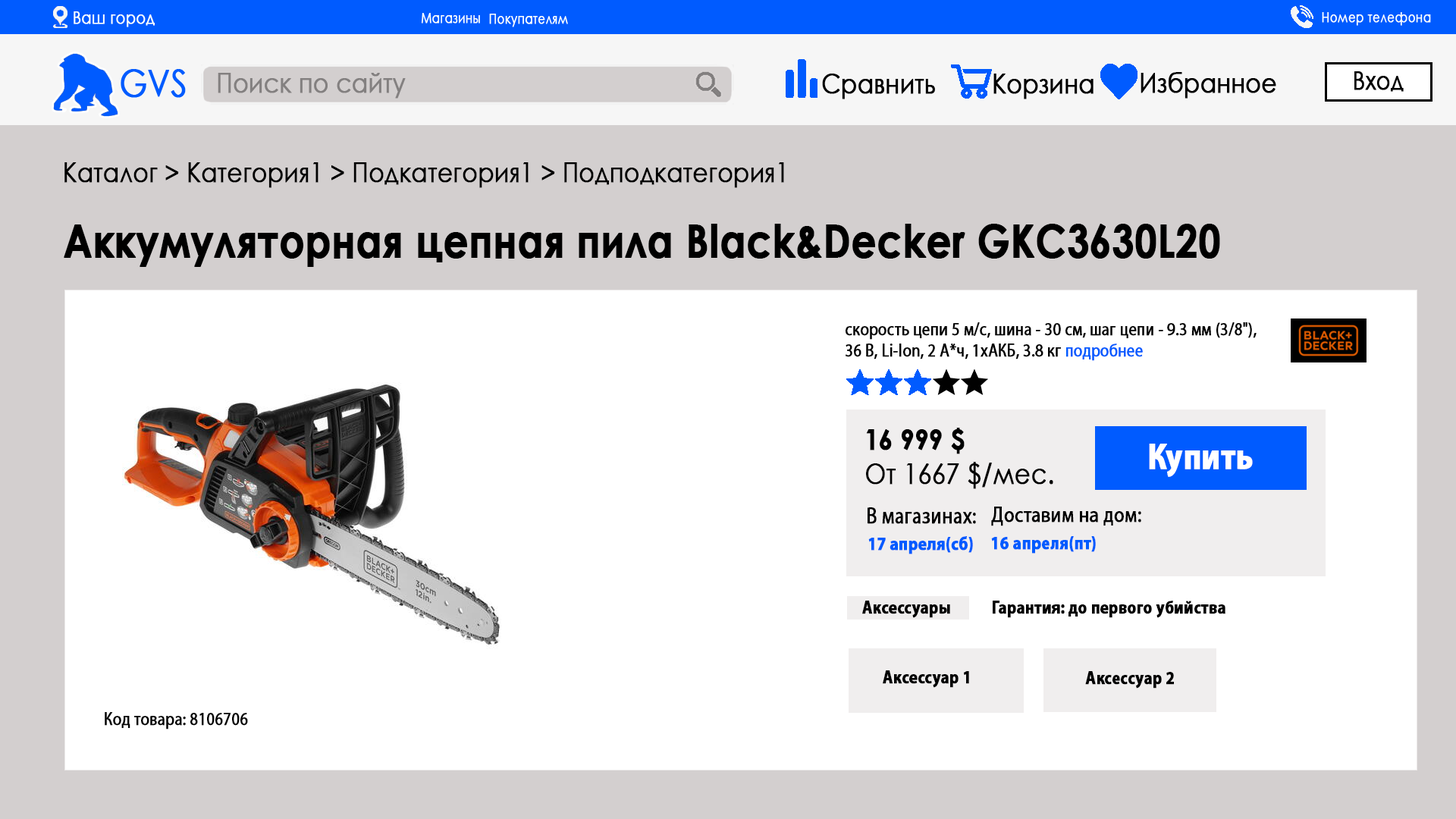
<style>
.page{position:relative;width:1456px;height:819px;background:#ffffff}
.page>*{position:absolute;margin:0}
.t1{font:13.6px "CenturyGothic";color:#ffffff;font-weight:bold;scale:0.85 1}
.t2{font:37.3px "CenturyGothic";color:#005bff;font-weight:bold;scale:0.85 1}
.t3{font:27.3px "CenturyGothic";color:#838080;font-weight:bold;scale:0.85 1}
.t4{font:27.3px "CenturyGothic";color:#000000;font-weight:bold;scale:0.85 1}
.t5{font:25px "CenturyGothic";color:#000000;font-weight:bold;scale:0.85 1}
.t6{font:45.5px "CenturyGothic-Bold";color:#000000;font-weight:bold;scale:0.85 1}
.t7{font:18.2px "MyriadPro-Regular";color:#000000;font-weight:bold;scale:0.85 1}
.t8{font:18.2px "MyriadPro-Regular";color:#005bff;font-weight:bold;scale:0.85 1}
.t9{font:28.5px "CenturyGothic";color:#000000;font-weight:bold;scale:0.85 1}
.t10{font:28.5px "CenturyGothic-Bold";color:#000000;font-weight:bold;scale:0.85 1}
.t11{font:36.4px "MyriadPro-Bold";color:#ffffff;font-weight:bold;scale:0.85 1}
.t12{font:22.7px "MyriadPro-Regular";color:#000000;font-weight:bold;scale:0.85 1}
.t13{font:22px "MyriadPro-Regular";color:#000000;font-weight:bold;scale:0.85 1}
.t14{font:18.8px "MyriadPro-Bold";color:#005bff;font-weight:bold;scale:0.85 1}
.t15{font:18.2px "MyriadPro-Bold";color:#000000;font-weight:bold;scale:0.85 1}
</style>
<div class="page">
<p class="t1" style="left:421px;top:13px;width:59px;height:11px">Магазины</p>
<p class="t1" style="left:489px;top:14px;width:79px;height:13px">Покупателям</p>
<p class="t2" style="left:121px;top:69px;width:65px;height:29px">GVS</p>
<p class="t3" style="left:218px;top:73px;width:188px;height:26px">Поиск по сайту</p>
<p class="t4" style="left:822px;top:74px;width:113px;height:25px">Сравнить</p>
<p class="t4" style="left:993px;top:74px;width:101px;height:25px">Корзина</p>
<p class="t4" style="left:1141px;top:72px;width:135px;height:27px">Избранное</p>
<p class="t5" style="left:1354px;top:71px;width:50px;height:21px">Вход</p>
<p class="t4" style="left:64px;top:162px;width:720px;height:26px">Каталог &gt; Категория1 &gt; Подкатегория1 &gt; Подподкатегория1</p>
<p class="t6" style="left:64px;top:224px;width:1156px;height:43px">Аккумуляторная цепная пила Black&amp;Decker GKC3630L20</p>
<p class="t7" style="left:845px;top:322px;width:412px;height:39px">скорость цепи 5 м/с, шина - 30 см, шаг цепи - 9.3 мм (3/8"), <br>36 В, Li-Ion, 2 А*ч, 1хАКБ, 3.8 кг <span class="t8">подробнее</span></p>
<p class="t9" style="left:866px;top:428px;width:187px;height:61px"><span class="t10">16 999 $<br></span>От 1667 $/мес.</p>
<p class="t11" style="left:1149px;top:444px;width:104px;height:33px">Купить</p>
<p class="t12" style="left:868px;top:507px;width:108px;height:17px">В магазинах:</p>
<p class="t13" style="left:991px;top:507px;width:150px;height:19px">Доставим на дом:</p>
<p class="t14" style="left:868px;top:536px;width:105px;height:18px">17 апреля(сб)</p>
<p class="t14" style="left:991px;top:536px;width:105px;height:18px">16 апреля(пт)</p>
<p class="t15" style="left:862px;top:601px;width:88px;height:17px">Аксессуары</p>
<p class="t15" style="left:993px;top:601px;width:232px;height:17px">Гарантия: до первого убийства</p>
<p class="t15" style="left:883px;top:670px;width:86px;height:18px">Аксессуар 1</p>
<p class="t15" style="left:1085px;top:671px;width:89px;height:18px">Аксессуар 2</p>
<p class="t7" style="left:105px;top:712px;width:143px;height:18px">Код товара: 8106706</p>
</div>
